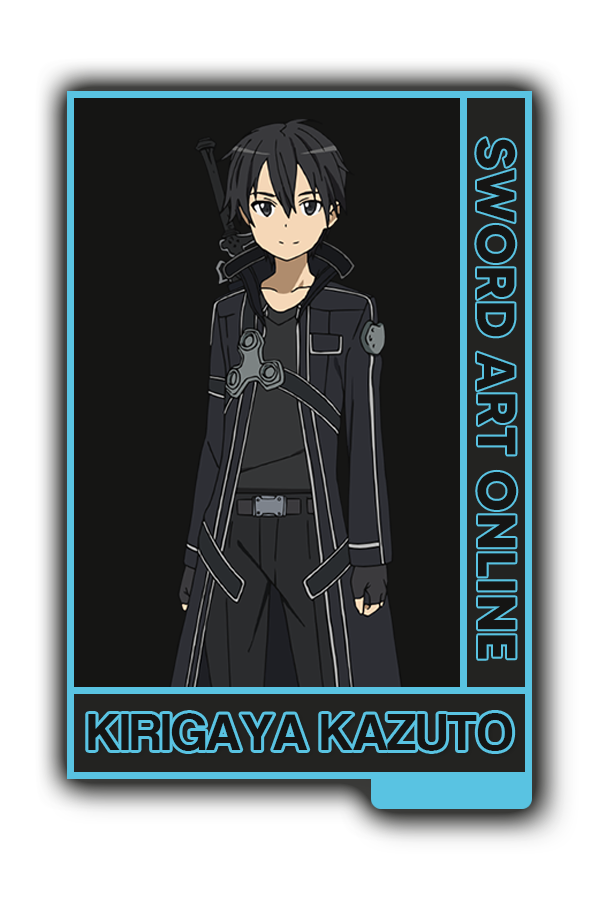
<style>
.page{position:relative;width:600px;height:900px;background:#151514}
.page>*{position:absolute;margin:0}
.t1{font:53.7px "MADETOMMY-Bold";color:#151514}
.t2{font:53.6px "CoolveticaRg-Regular";color:#151514}
</style>
<div class="page">
<p class="t1" style="left:476px;top:138px;width:41px;height:521px;rotate:90deg">SWORD ART ONLINE</p>
<p class="t2" style="left:88px;top:713px;width:425px;height:38px">KIRIGAYA KAZUTO</p>
</div>
